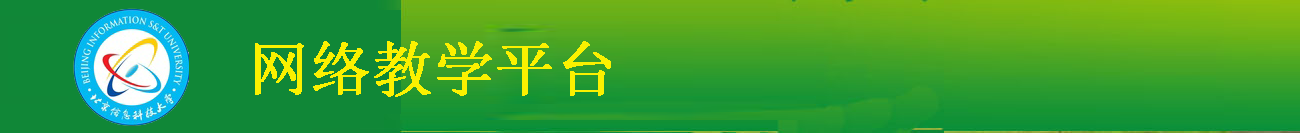
<style>
.page{position:relative;width:1300px;height:133px;background:#108737}
.page>*{position:absolute;margin:0}
.t1{font:60px "SimSun";color:#fbf100;font-weight:bold}
</style>
<div class="page">
<p class="t1" style="left:255px;top:41px;width:356px;height:56px">网络教学平台</p>
</div>
